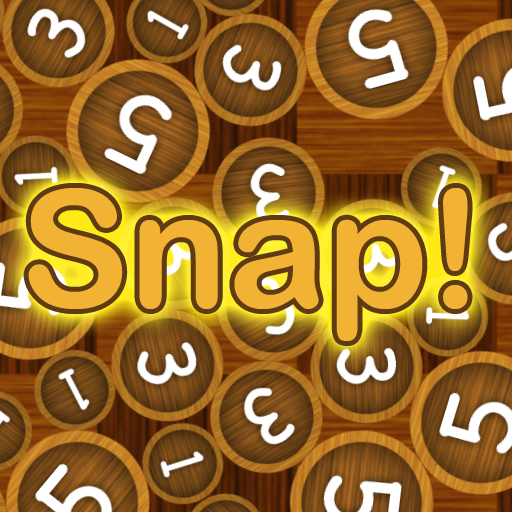
<style>
.page{position:relative;width:512px;height:512px}
.page>*{position:absolute;margin:0}
.t1{font:164px "ArialRoundedMTBold";color:#f2b335}
</style>
<div class="page">
<p class="t1" style="left:28px;top:188px;width:440px;height:153px">Snap!</p>
</div>
